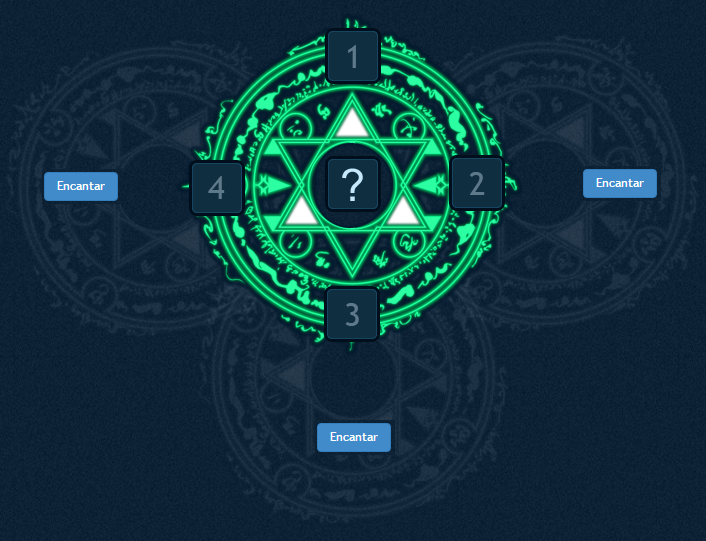
<style>
.page{position:relative;width:706px;height:541px}
.page>*{position:absolute;margin:0}
.t1{font:32.3px "TrebuchetMS";color:#5e7989}
.t2{font:62.6px "Utsaah";color:#c5e8fc}
</style>
<div class="page">
<p class="t1" style="left:348px;top:45px;width:8px;height:23px">1</p>
<p class="t2" style="left:342px;top:168px;width:21px;height:33px">?</p>
<p class="t1" style="left:470px;top:172px;width:15px;height:23px">2</p>
<p class="t1" style="left:208px;top:176px;width:17px;height:23px">4</p>
<p class="t1" style="left:345px;top:303px;width:14px;height:23px">3</p>
</div>
